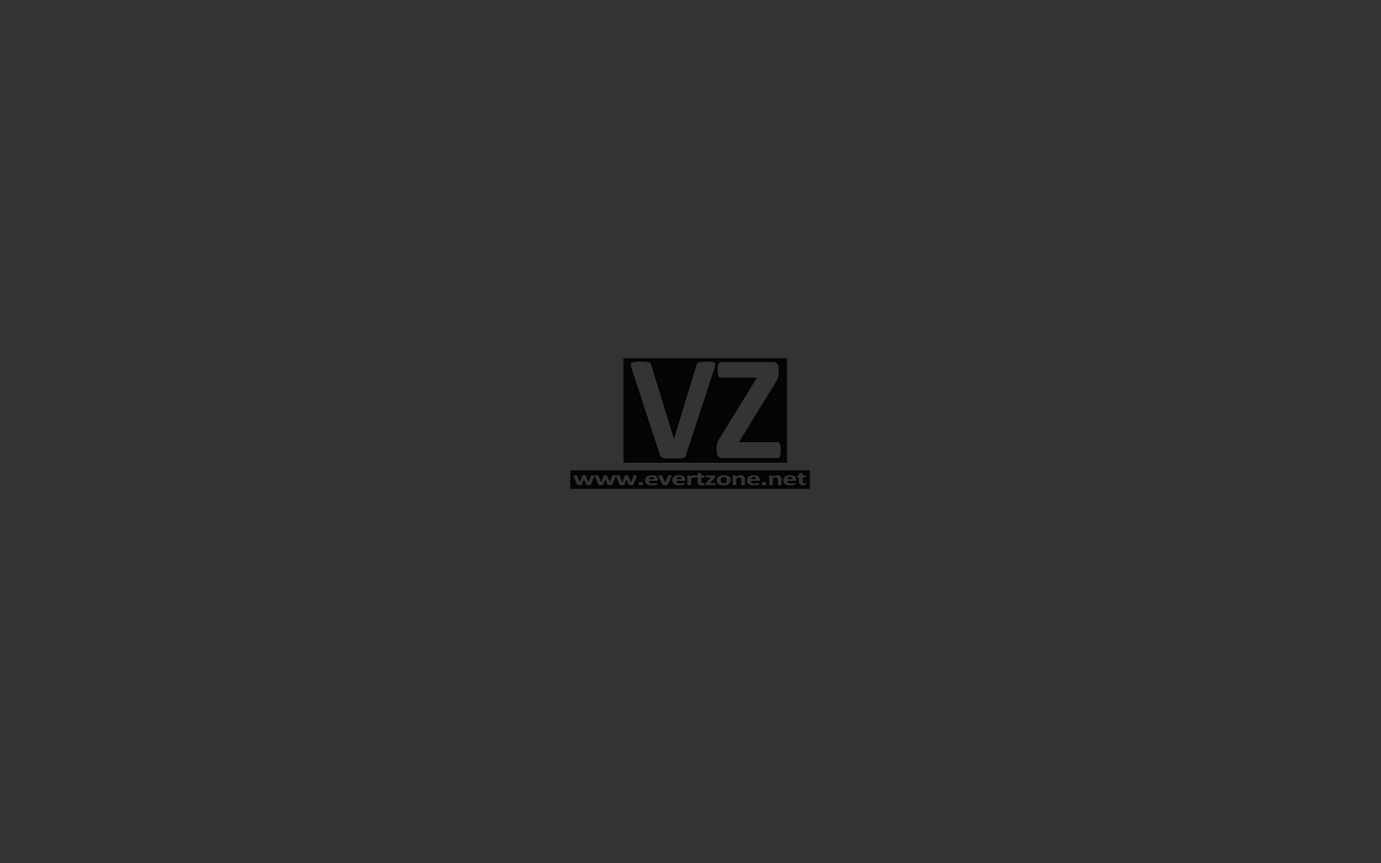
<style>
.page{position:relative;width:1381px;height:863px;background:#333333}
.page>*{position:absolute;margin:0}
.t1{font:151.8px "Calibri-Bold";letter-spacing:-0.025em;color:#343434}
.t2{font:20.8px "Calibri-Bold";letter-spacing:-0.025em;color:#343434;scale:1.42 1}
</style>
<div class="page">
<p class="t1" style="left:631px;top:362px;width:150px;height:97px">VZ</p>
<p class="t2" style="left:573px;top:473px;width:234px;height:13px">www.evertzone.net</p>
</div>
